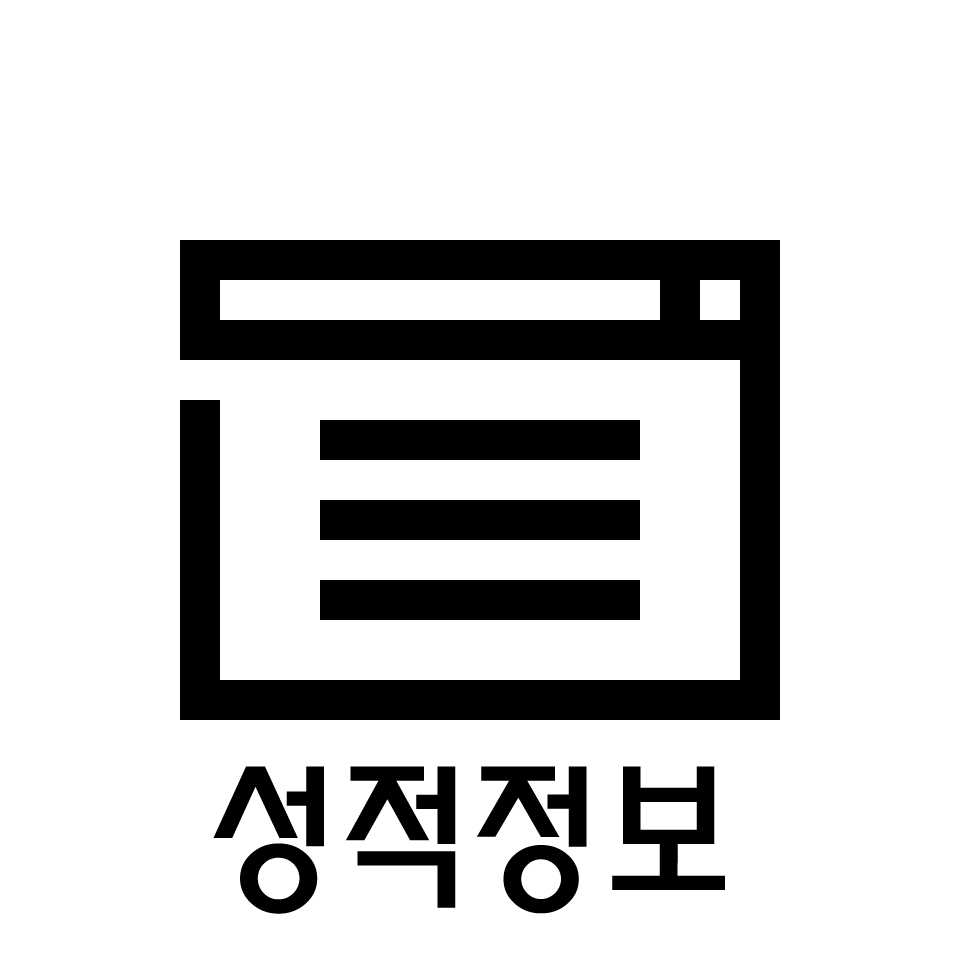
<style>
.page{position:relative;width:960px;height:960px;background:#ffffff}
.page>*{position:absolute;margin:0}
.t1{font:160px "MoeumTR-HM";color:#000000}
</style>
<div class="page">
<p class="t1" style="left:213px;top:766px;width:512px;height:148px">성적정보</p>
</div>
